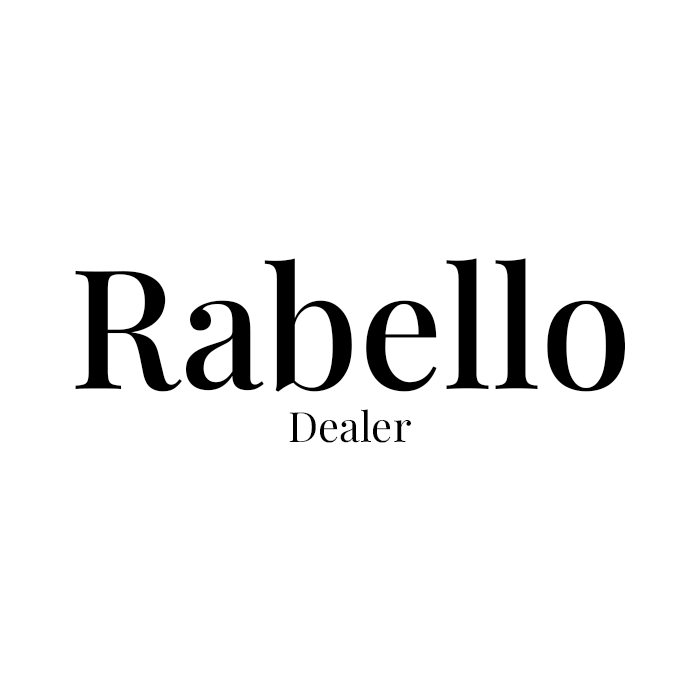
<style>
.page{position:relative;width:700px;height:700px;background:#ffffff}
.page>*{position:absolute;margin:0}
.t1{font:166.7px "PlayfairDisplayRoman-Medium";color:#000000}
.t2{font:41.7px "PlayfairDisplay-Regular";color:#000000}
</style>
<div class="page">
<p class="t1" style="left:75px;top:258px;width:550px;height:134px">Rabello</p>
<p class="t2" style="left:289px;top:409px;width:122px;height:34px">Dealer</p>
</div>
